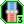
<style>
.page{position:relative;width:24px;height:24px}
.page>*{position:absolute;margin:0}
.t1{font:9px "Montserrat-Bold";color:#000000}
</style>
<div class="page">
<p class="t1" style="left:17px;top:16px;width:6px;height:7px">3</p>
</div>
